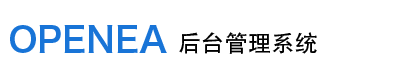
<style>
.page{position:relative;width:417px;height:64px;background:#ffffff}
.page>*{position:absolute;margin:0}
.t1{font:35px "HiraginoSansGB-W6";color:#1874d7}
.t2{font:23.3px "AdobeHeitiStd-Regular";color:#000000}
</style>
<div class="page">
<p class="t1" style="left:10px;top:25px;width:157px;height:28px">OPENEA</p>
<p class="t2" style="left:179px;top:32px;width:138px;height:22px">后台管理系统</p>
</div>
